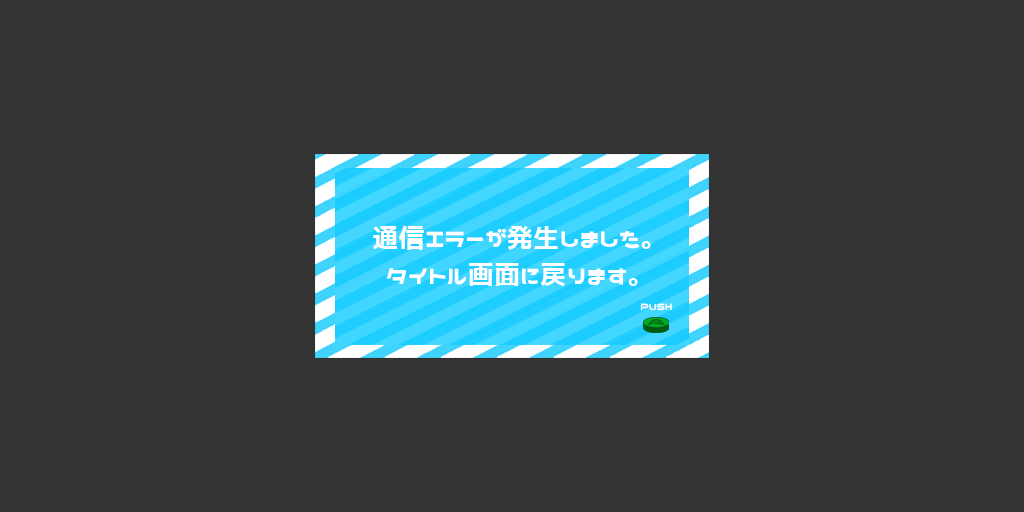
<style>
.page{position:relative;width:1024px;height:512px;background:#333333}
.page>*{position:absolute;margin:0}
.t1{font:26.4px/36.7px "Nicoca";color:#ffffff}
.t2{font:10.7px "Nicoca";color:#ffffff}
</style>
<div class="page">
<p class="t1" style="left:373px;top:225px;width:278px;height:61px;text-align:center">通信エラーが発生しました。<br>タイトル画面に戻ります。</p>
<p class="t2" style="left:640px;top:303px;width:32px;height:8px">PUSH</p>
</div>
